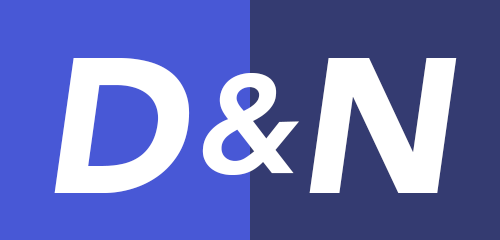
<style>
.page{position:relative;width:500px;height:240px;background:#4858d6}
.page>*{position:absolute;margin:0}
.t1{font:190px "AvenirLT-BlackOblique";letter-spacing:-0.08em;color:#ffffff}
.t2{font:138px "AvenirLT-HeavyOblique";letter-spacing:-0.08em;color:#ffffff}
</style>
<div class="page">
<p class="t1" style="left:54px;top:58px;width:136px;height:135px">D</p>
<p class="t1" style="left:309px;top:58px;width:148px;height:135px">N</p>
<p class="t2" style="left:202px;top:73px;width:97px;height:102px">&amp;</p>
</div>
